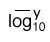
<style>
.page{position:relative;width:50px;height:42px;background:#ffffff}
.page>*{position:absolute;margin:0}
.t1{font:18px "Helvetica";color:#000000}
.t2{font:14.4px "LucidaGrande";color:#000000}
.t3{font:12px "Helvetica";color:#000000}
</style>
<div class="page">
<p class="t1" style="left:9px;top:14px;width:22px;height:17px">log</p>
<p class="t2" style="left:33px;top:10px;width:8px;height:10px">y</p>
<p class="t3" style="left:33px;top:22px;width:12px;height:9px">10</p>
</div>
